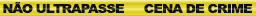
<style>
.page{position:relative;width:256px;height:16px}
.page>*{position:absolute;margin:0}
.t1{font:12px "Arial-Black";letter-spacing:-0.07em;color:#0f0e0e;scale:1.11 1}
.t2{font:12px "Arial-Black";letter-spacing:-0.06em;color:#0f0e0e;scale:1.11 1}
</style>
<div class="page">
<p class="t1" style="left:3px;top:2px;width:121px;height:11px">NÃO ULTRAPASSE</p>
<p class="t2" style="left:144px;top:4px;width:108px;height:9px">CENA DE CRIME</p>
</div>
